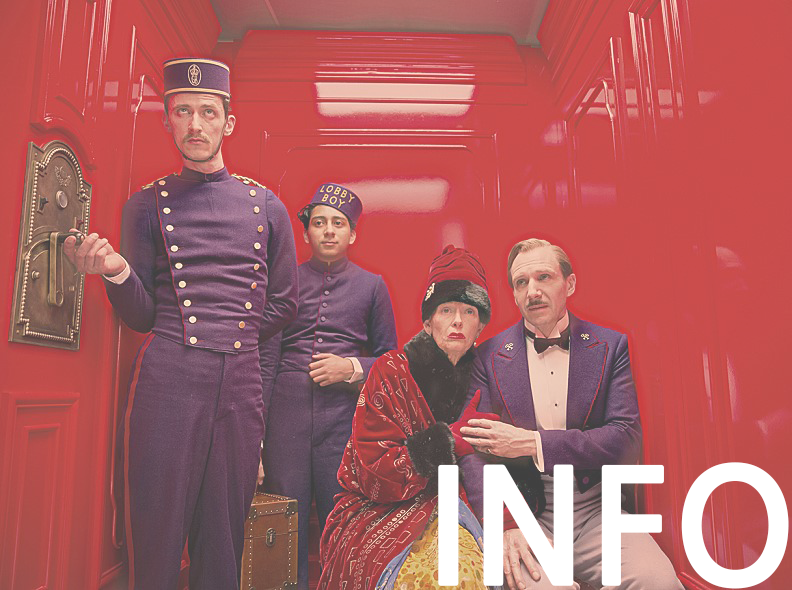
<style>
.page{position:relative;width:792px;height:590px}
.page>*{position:absolute;margin:0}
.t1{font:157.9px "NanumGothicBold";color:#ffffff;font-weight:bold}
</style>
<div class="page">
<p class="t1" style="left:438px;top:462px;width:351px;height:127px">INFO</p>
</div>
